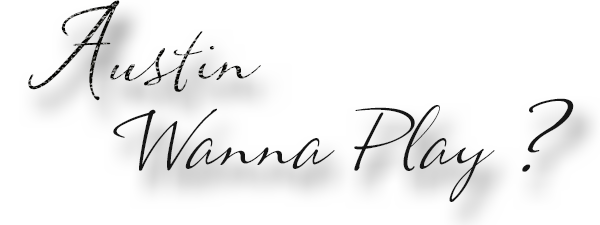
<style>
.page{position:relative;width:600px;height:225px;background:#ffffff}
.page>*{position:absolute;margin:0}
.t1{font:100px "KatTailHMK";color:#020000}
.t2{font:75px "KatTailHMK";color:#020000}
</style>
<div class="page">
<p class="t1" style="left:28px;top:0px;width:92px;height:101px">A</p>
<p class="t2" style="left:110px;top:31px;width:151px;height:61px">ustin</p>
<p class="t1" style="left:522px;top:98px;width:52px;height:74px">?</p>
<p class="t2" style="left:113px;top:105px;width:382px;height:97px">Wanna Play</p>
</div>
